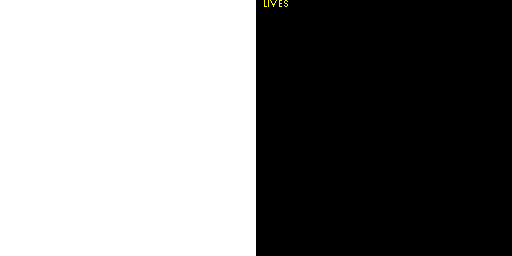
<style>
.page{position:relative;width:512px;height:256px;background:#ffffff}
.page>*{position:absolute;margin:0}
.t1{font:10px "FuturaPT-Heavy";letter-spacing:0.05em;color:#ffff00}
</style>
<div class="page">
<p class="t1" style="left:264px;top:0px;width:24px;height:7px">LIVES</p>
</div>
